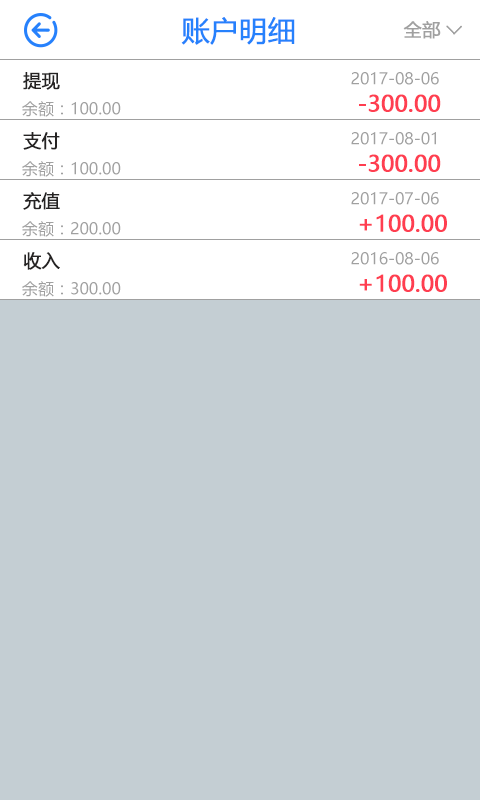
<style>
.page{position:relative;width:480px;height:800px;background:#c4ced3}
.page>*{position:absolute;margin:0}
.t1{font:28px "MicrosoftYaHei";color:#2681fc;font-weight:bold}
.t2{font:18px "MicrosoftYaHei";color:#a0a0a0;font-weight:bold}
.t3{font:18px "MicrosoftYaHei";color:#252323;font-weight:bold}
.t4{font:16px "MicrosoftYaHei";color:#a0a0a0}
.t5{font:22px "MicrosoftYaHei";color:#ff3e50;font-weight:bold}
</style>
<div class="page">
<p class="t1" style="left:181px;top:17px;width:114px;height:28px">账户明细</p>
<p class="t2" style="left:403px;top:21px;width:38px;height:18px">全部</p>
<p class="t3" style="left:23px;top:72px;width:37px;height:18px">提现</p>
<p class="t4" style="left:351px;top:72px;width:88px;height:13px">2017-08-06</p>
<p class="t4" style="left:22px;top:101px;width:99px;height:16px">余额：100.00</p>
<p class="t5" style="left:359px;top:94px;width:82px;height:18px">-300.00</p>
<p class="t3" style="left:23px;top:132px;width:37px;height:18px">支付</p>
<p class="t4" style="left:351px;top:132px;width:85px;height:13px">2017-08-01</p>
<p class="t4" style="left:22px;top:161px;width:99px;height:16px">余额：100.00</p>
<p class="t5" style="left:359px;top:154px;width:82px;height:18px">-300.00</p>
<p class="t3" style="left:23px;top:192px;width:37px;height:18px">充值</p>
<p class="t4" style="left:351px;top:192px;width:88px;height:13px">2017-07-06</p>
<p class="t4" style="left:22px;top:221px;width:99px;height:16px">余额：200.00</p>
<p class="t5" style="left:359px;top:214px;width:88px;height:18px">+100.00</p>
<p class="t3" style="left:23px;top:252px;width:37px;height:18px">收入</p>
<p class="t4" style="left:351px;top:252px;width:88px;height:13px">2016-08-06</p>
<p class="t4" style="left:22px;top:281px;width:99px;height:16px">余额：300.00</p>
<p class="t5" style="left:359px;top:274px;width:88px;height:18px">+100.00</p>
</div>
